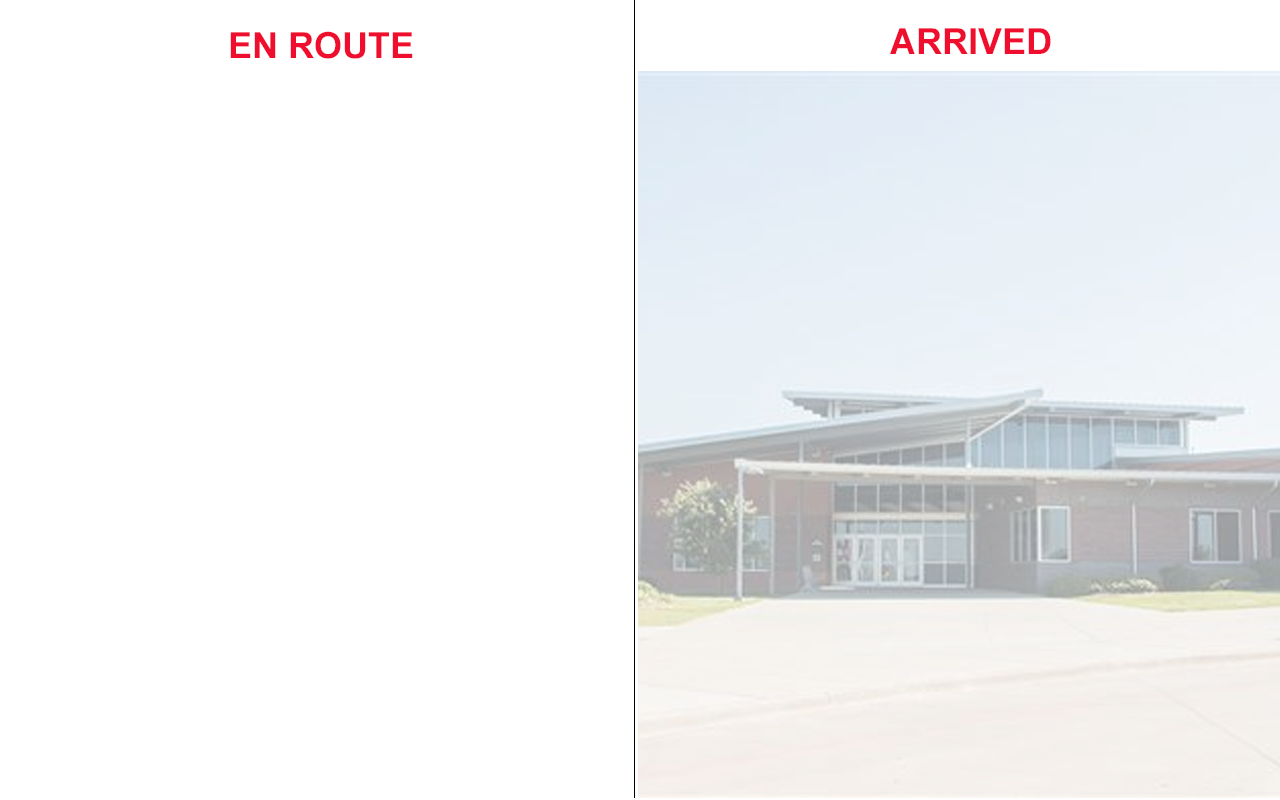
<style>
.page{position:relative;width:1280px;height:800px;background:#ffffff}
.page>*{position:absolute;margin:0}
.t1{font:36px "Arial-BoldMT";color:#f00e2e}
</style>
<div class="page">
<p class="t1" style="left:890px;top:28px;width:161px;height:26px">ARRIVED</p>
<p class="t1" style="left:230px;top:31px;width:183px;height:28px">EN ROUTE</p>
</div>
